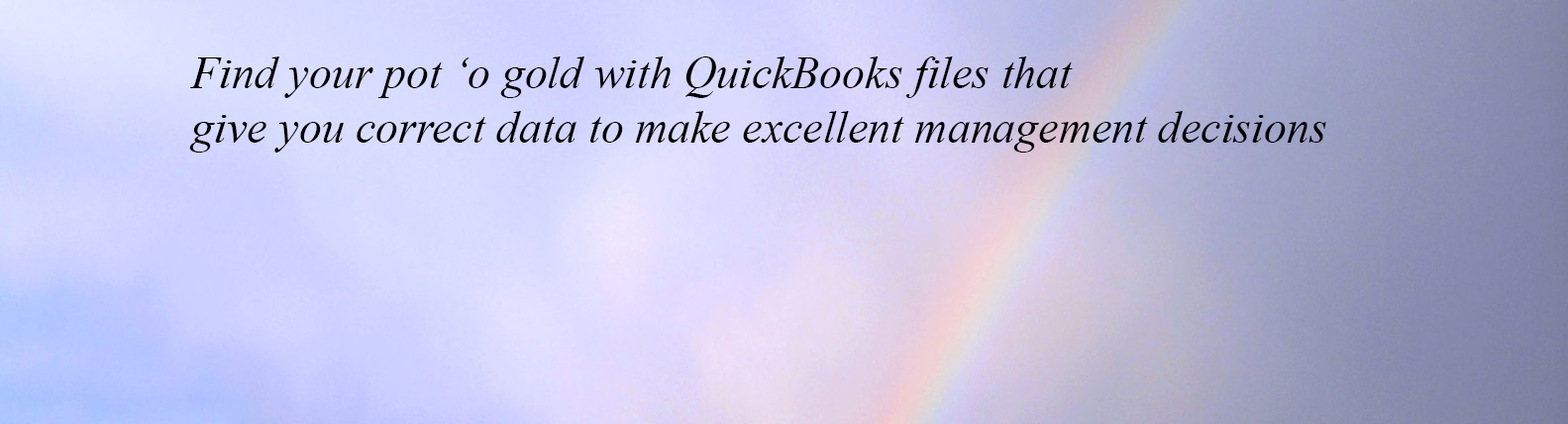
<style>
.page{position:relative;width:1568px;height:424px}
.page>*{position:absolute;margin:0}
.t1{font:45.4px "TimesNewRomanPS-ItalicMT";color:#000000}
</style>
<div class="page">
<p class="t1" style="left:189px;top:56px;width:1137px;height:97px">Find your pot ‘o gold with QuickBooks files that<br>give you correct data to make excellent management decisions</p>
</div>
